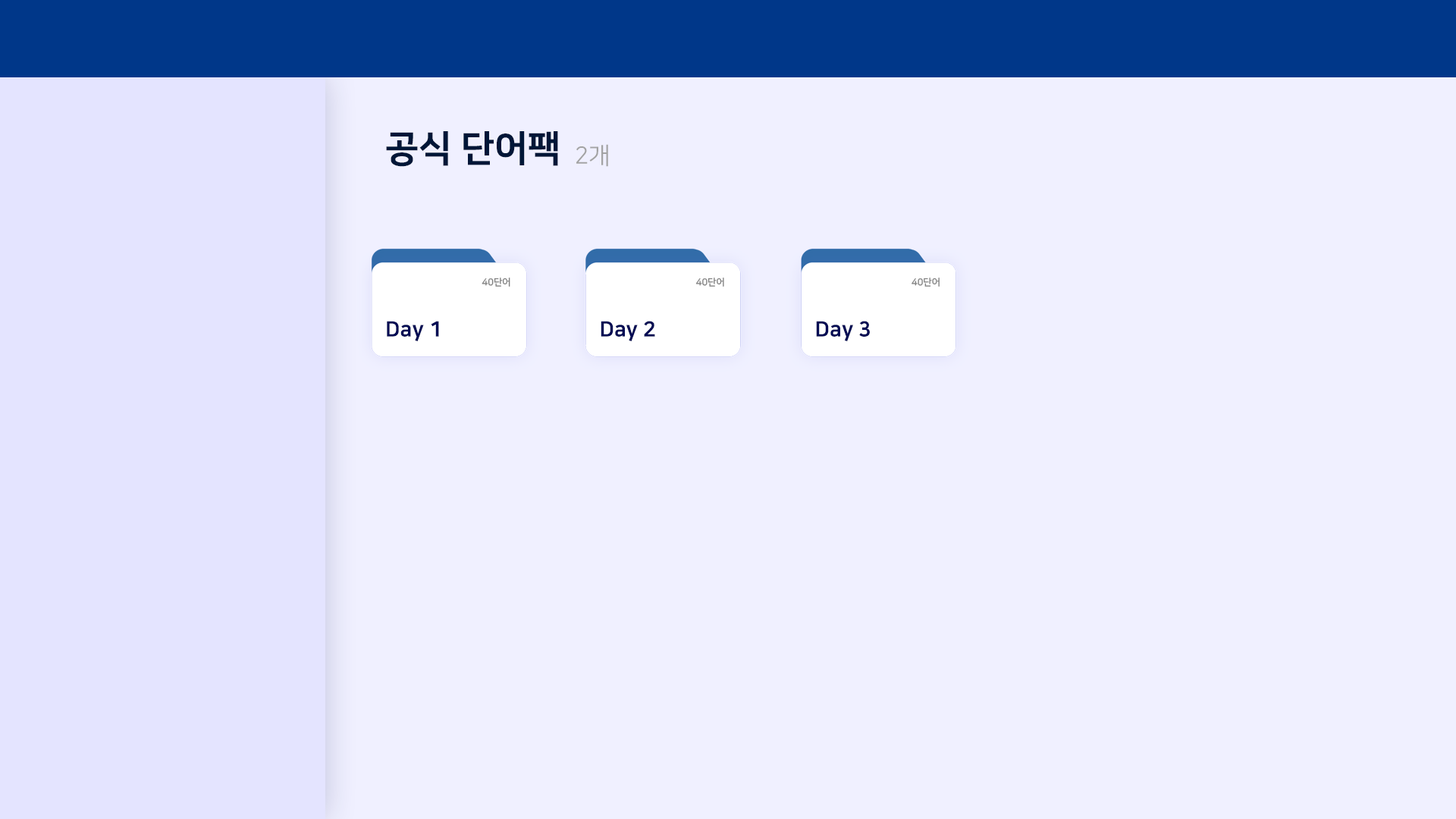
<style>
.page{position:relative;width:1456px;height:819px;background:#f0f0ff}
.page>*{position:absolute;margin:0}
.t1{font:36.6px "NanumSquareEB";color:#001637}
.t2{font:23.7px "NanumSquareR";color:#a3a3a3}
.t3{font:9.5px "NanumSquareB";color:#838383}
.t4{font:21px "NanumSquareEB";color:#000a54}
</style>
<div class="page">
<p class="t1" style="left:386px;top:131px;width:172px;height:36px">공식 단어팩</p>
<p class="t2" style="left:576px;top:144px;width:32px;height:23px">2개</p>
<p class="t3" style="left:482px;top:278px;width:28px;height:9px">40단어</p>
<p class="t3" style="left:695px;top:278px;width:29px;height:9px">40단어</p>
<p class="t3" style="left:912px;top:278px;width:28px;height:9px">40단어</p>
<p class="t4" style="left:387px;top:321px;width:52px;height:20px">Day 1</p>
<p class="t4" style="left:601px;top:321px;width:54px;height:20px">Day 2</p>
<p class="t4" style="left:816px;top:321px;width:54px;height:20px">Day 3</p>
</div>
